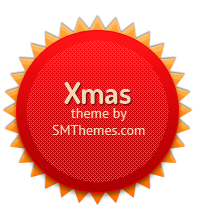
<style>
.page{position:relative;width:202px;height:209px;background:#ffffff}
.page>*{position:absolute;margin:0}
.t1{font:30px "TerminalDosis-Bold";color:#f3d8b8}
.t2{font:14px "PTSans-Regular";color:#f3d8b8}
</style>
<div class="page">
<p class="t1" style="left:64px;top:82px;width:67px;height:22px">Xmas</p>
<p class="t2" style="left:52px;top:108px;width:93px;height:27px;text-align:justify">theme by <br>SMThemes.com</p>
</div>
